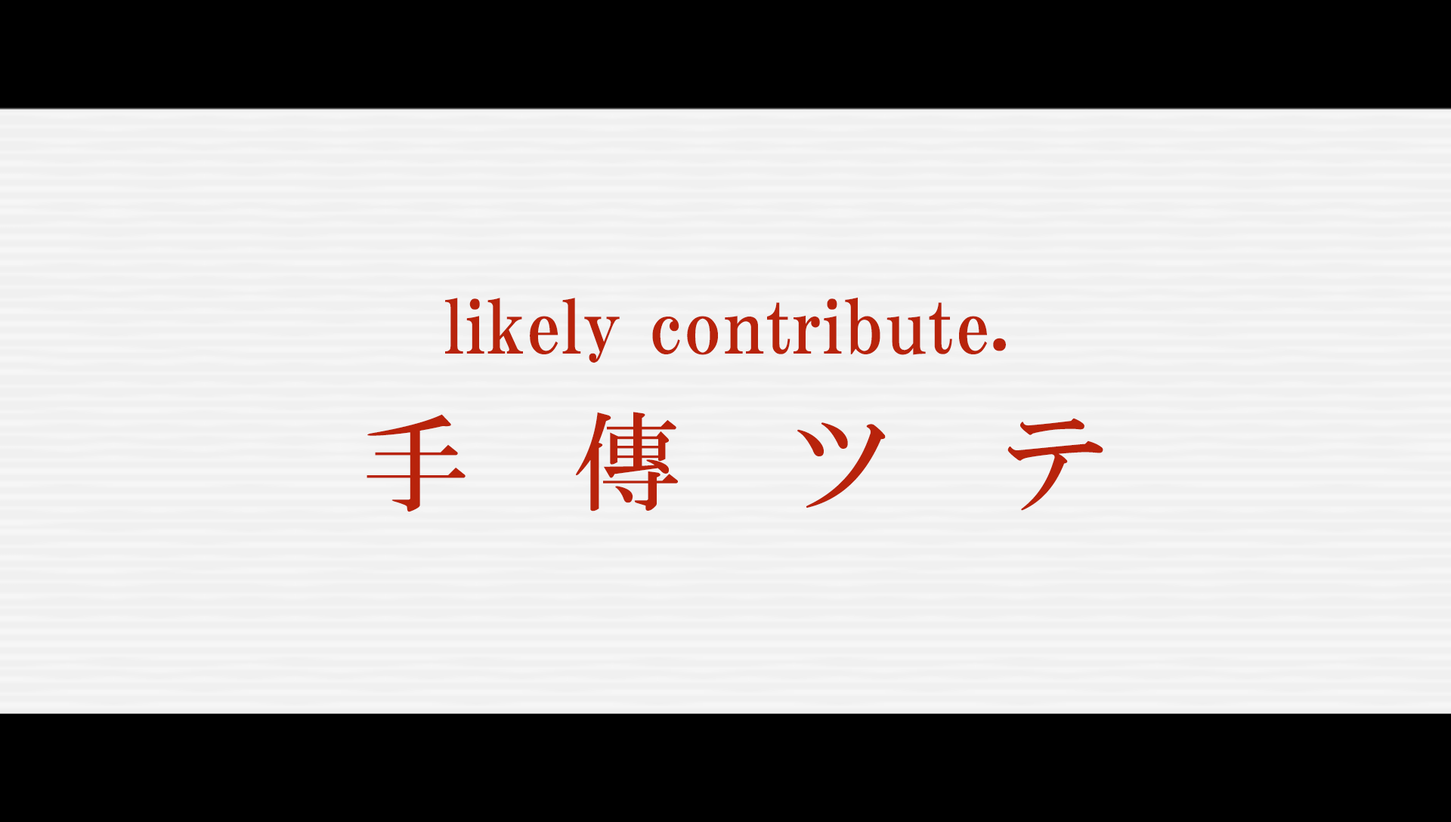
<style>
.page{position:relative;width:1451px;height:822px;background:#f0f0f0}
.page>*{position:absolute;margin:0}
.t1{font:72.5px "HGPMinchoE";letter-spacing:0.025em;color:#b8230b}
.t2{font:107.8px "HGMinchoB";letter-spacing:0.98em;color:#b8230b}
</style>
<div class="page">
<p class="t1" style="left:445px;top:297px;width:561px;height:66px">likely contribute.</p>
<p class="t2" style="left:366px;top:412px;width:737px;height:100px">手傳ツテ</p>
</div>
